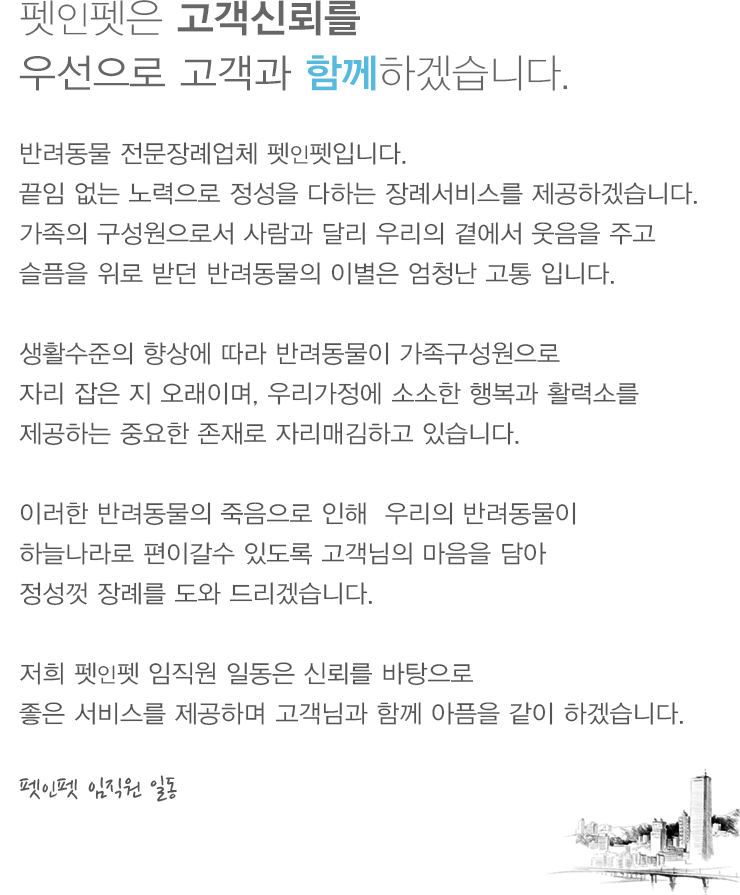
<style>
.page{position:relative;width:740px;height:895px;background:#ffffff}
.page>*{position:absolute;margin:0}
.t1{font:40px/55px "YDVYGO32";color:#666666}
.t2{font:40px/55px "YDVYGO31";color:#666666}
.t3{font:36px/55px "YDVYGO31";color:#666666}
.t4{font:40px/55px "YDVYGO34";color:#666666}
.t5{font:40px/55px "YDVYGO34";color:#56badf}
.t6{font:25px/40px "YDVYGO32";color:#555555}
.t7{font:21px/40px "YDVYGO32";color:#555555}
.t8{font:30px "NanumPen";color:#555555}
.t9{font:26px "NanumPen";color:#555555}
</style>
<div class="page">
<p class="t1" style="left:19px;top:0px;width:549px;height:91px"><span class="t2">펫</span><span class="t3">인</span><span class="t2">펫은 </span><span class="t4">고객신뢰를<br></span>우선으로 고객과<span class="t5"> 함께</span><span class="t2">하겠습니다.</span></p>
<p class="t6" style="left:19px;top:142px;width:678px;height:584px">반려동물 전문장례업체 펫<span class="t7">인</span>펫입니다.<br>끝임 없는 노력으로 정성을 다하는 장례서비스를 제공하겠습니다.<br>가족의 구성원으로서 사람과 달리 우리의 곁에서 웃음을 주고<br>슬픔을 위로 받던 반려동물의 이별은 엄청난 고통 입니다.<br><br>생활수준의 향상에 따라 반려동물이 가족구성원으로<br>자리 잡은 지 오래이며, 우리가정에 소소한 행복과 활력소를<br>제공하는 중요한 존재로 자리매김하고 있습니다.<br><br>이러한 반려동물의 죽음으로 인해  우리의 반려동물이<br>하늘나라로 편이갈수 있도록 고객님의 마음을 담아<br>정성껏 장례를 도와 드리겠습니다.<br><br>저희 펫<span class="t7">인</span>펫 임직원 일동은 신뢰를 바탕으로<br>좋은 서비스를 제공하며 고객님과 함께 아픔을 같이 하겠습니다.</p>
<p class="t8" style="left:19px;top:775px;width:158px;height:27px">펫<span class="t9">인</span>펫 임직원 일동</p>
</div>
